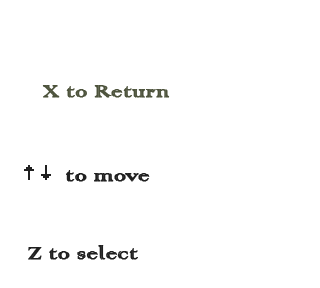
<style>
.page{position:relative;width:320px;height:288px;background:#ffffff}
.page>*{position:absolute;margin:0}
.t1{font:24px "ColonnaMT";color:#4d533c;font-weight:bold}
.t2{font:24px "ColonnaMT";color:#202020;font-weight:bold}
</style>
<div class="page">
<p class="t1" style="left:42px;top:85px;width:128px;height:13px">X to Return</p>
<p class="t2" style="left:66px;top:170px;width:84px;height:12px">to move</p>
<p class="t2" style="left:28px;top:245px;width:110px;height:15px">Z to select</p>
</div>
